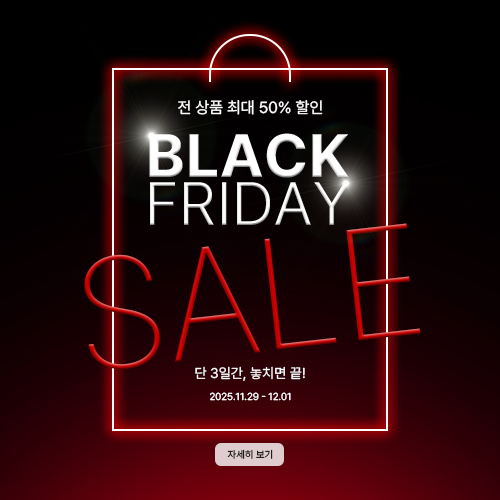
<style>
.page{position:relative;width:500px;height:500px}
.page>*{position:absolute;margin:0}
.t1{font:16px "Pretendard-Regular";color:#ffffff;text-transform:uppercase}
.t2{font:156.6px "Pretendard-Thin";letter-spacing:-0.02em;text-transform:uppercase}
.t3{font:14px "Pretendard-Regular";color:#ffffff;text-transform:uppercase}
.t4{font:10px "Pretendard-Regular";color:#ffffff;text-transform:uppercase}
.t5{font:10px "Pretendard-Regular";text-transform:uppercase}
</style>
<div class="page">
<p class="t1" style="left:178px;top:100px;width:145px;height:15px">전 상품 최대 50% 할인</p>
<p class="t2" style="left:84px;top:223px;width:337px;height:147px;rotate:-6deg">SALE</p>
<p class="t3" style="left:195px;top:366px;width:110px;height:15px">단 3일간, 놓치면 끝!</p>
<p class="t4" style="left:210px;top:392px;width:81px;height:9px">2025.11.29 - 12.01</p>
<p class="t5" style="left:227px;top:449px;width:46px;height:10px">자세히 보기</p>
</div>
